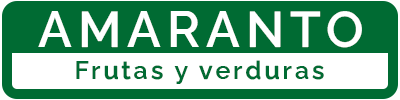
<style>
.page{position:relative;width:400px;height:100px;background:#006b33}
.page>*{position:absolute;margin:0}
.t1{font:50px "RalewayRoman-SemiBold";letter-spacing:0.12em;color:#ffffff}
.t2{font:25px "RalewayRoman-SemiBold";letter-spacing:0.12em;color:#006b33}
</style>
<div class="page">
<p class="t1" style="left:38px;top:11px;width:324px;height:37px">AMARANTO</p>
<p class="t2" style="left:76px;top:60px;width:248px;height:24px">Frutas y verduras</p>
</div>
